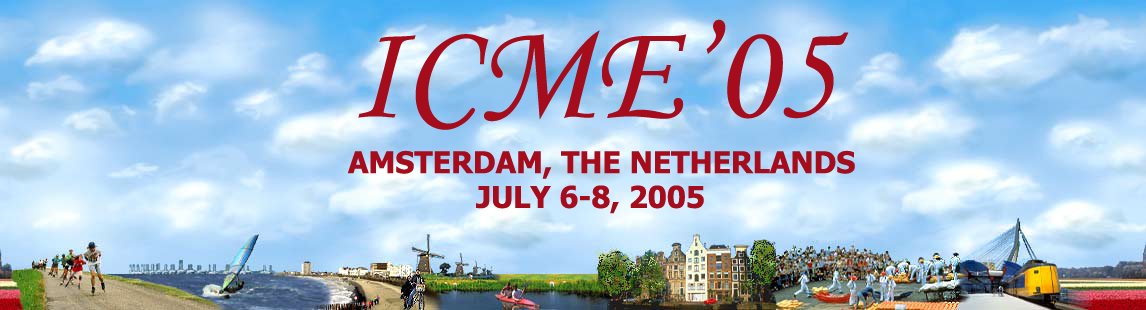
<style>
.page{position:relative;width:1146px;height:310px}
.page>*{position:absolute;margin:0}
.t1{font:140px "MonotypeCorsiva";color:#a50d1c}
.t2{font:30px "Tahoma-Bold";color:#a50d1c}
</style>
<div class="page">
<p class="t1" style="left:358px;top:19px;width:491px;height:111px">ICME’05</p>
<p class="t2" style="left:347px;top:150px;width:508px;height:29px">AMSTERDAM, THE NETHERLANDS</p>
<p class="t2" style="left:476px;top:185px;width:228px;height:29px">JULY 6-8, 2005</p>
</div>
